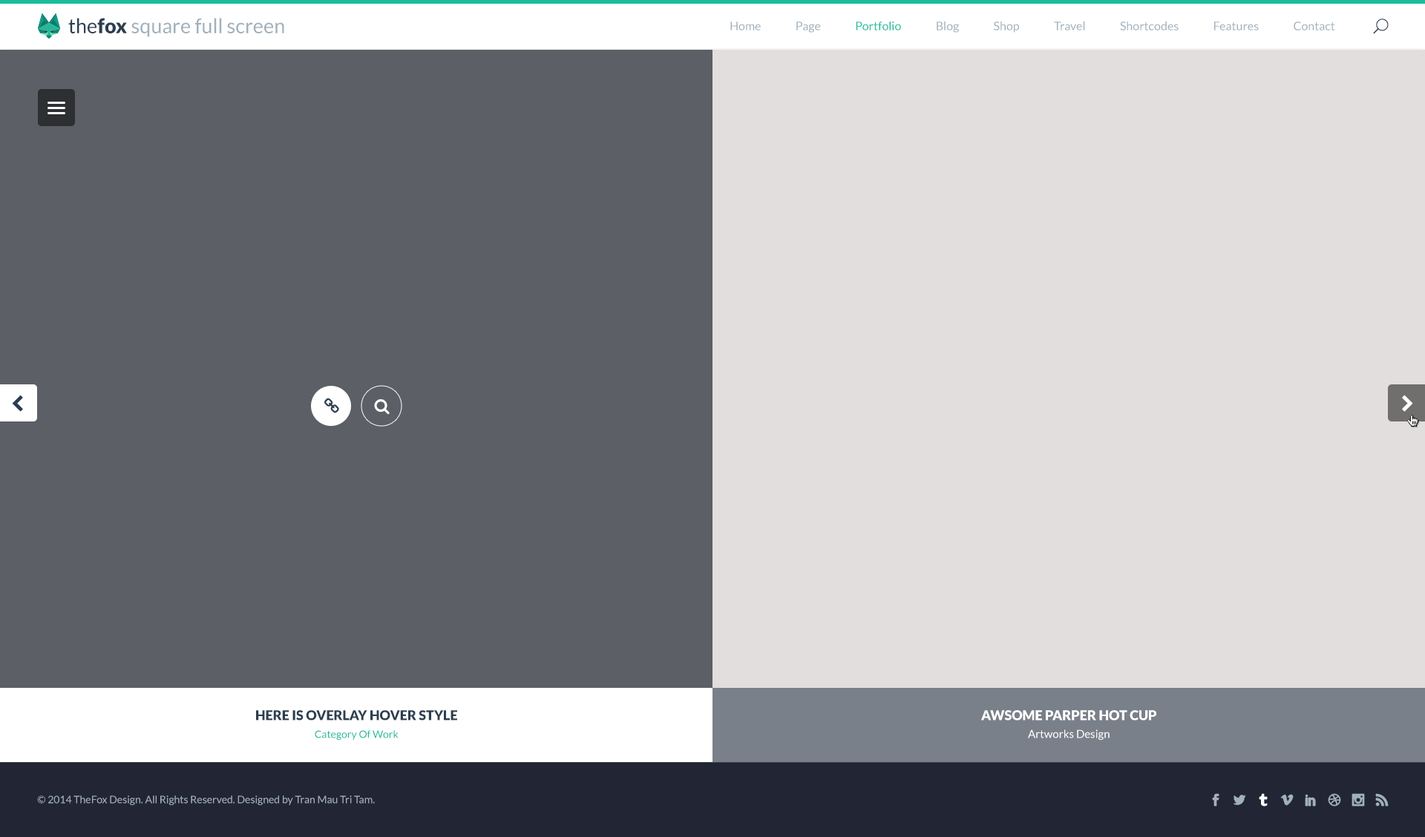
<style>
.page{position:relative;width:1425px;height:837px;background:#e2dedd}
.page>*{position:absolute;margin:0}
.t1{font:20.2px "Lato-Regular";color:#a1b1bc}
.t2{font:20.2px "Lato-Regular";color:#2c3e50}
.t3{font:20.2px "Lato-Black";color:#2c3e50}
.t4{font:11.9px "Lato-Regular";color:#a1b1bc}
.t5{font:11.9px "Lato-Regular";color:#1abc9c}
.t6{font:13.4px/17.8px "Lato-Black";color:#2c3e50}
.t7{font:10.4px/17.8px "Lato-Regular";color:#1abc9c}
.t8{font:13.4px/17.8px "Lato-Black";color:#ffffff}
.t9{font:11.1px/17.8px "Lato-Regular";color:#ffffff}
.t10{font:10.4px "Lato-Regular";color:#a1b1bc}
</style>
<div class="page">
<p class="t1" style="left:68px;top:18px;width:216px;height:19px"><span class="t2">the</span><span class="t3">fox </span>square full screen</p>
<p class="t4" style="left:730px;top:22px;width:605px;height:11px">Home               Page               <span class="t5">Portfolio</span>               Blog               Shop               Travel               Shortcodes               Features               Contact</p>
<p class="t6" style="left:256px;top:710px;width:201px;height:30px;text-align:center">HERE IS OVERLAY HOVER STYLE<br><span class="t7">Category Of Work</span></p>
<p class="t8" style="left:981px;top:710px;width:175px;height:30px;text-align:center">AWSOME PARPER HOT CUP<br><span class="t9">Artworks Design</span></p>
<p class="t10" style="left:37px;top:795px;width:338px;height:10px">© 2014 TheFox Design. All Rights Reserved. Designed by Tran Mau Tri Tam.</p>
</div>
